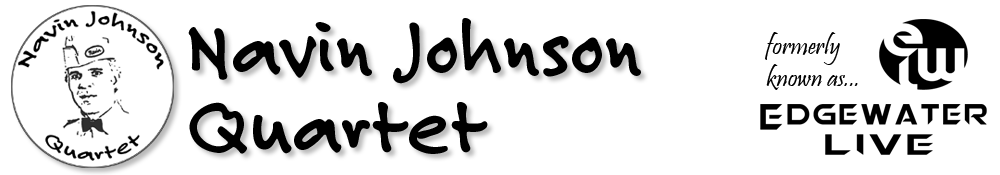
<style>
.page{position:relative;width:1000px;height:175px;background:#ffffff}
.page>*{position:absolute;margin:0}
.t1{font:82px/78px "FeltTipRoman-Bold";color:#000000}
.t2{font:27px "Pristina-Regular";color:#000000}
</style>
<div class="page">
<p class="t1" style="left:188px;top:18px;width:453px;height:136px">Navin Johnson<br>Quartet</p>
<p class="t2" style="left:765px;top:32px;width:93px;height:58px">formerly<br>known as...</p>
</div>
